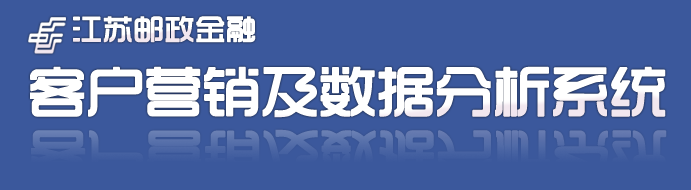
<style>
.page{position:relative;width:691px;height:190px;background:#3b589c}
.page>*{position:absolute;margin:0}
.t1{font:30px "TRENDS";color:#ffffff;font-weight:bold}
.t2{font:58px "TRENDS";letter-spacing:-0.025em;color:#ffffff;font-weight:bold}
</style>
<div class="page">
<p class="t1" style="left:73px;top:16px;width:183px;height:27px">江苏邮政金融</p>
<p class="t2" style="left:30px;top:66px;width:636px;height:52px">客户营销及数据分析系统</p>
</div>
